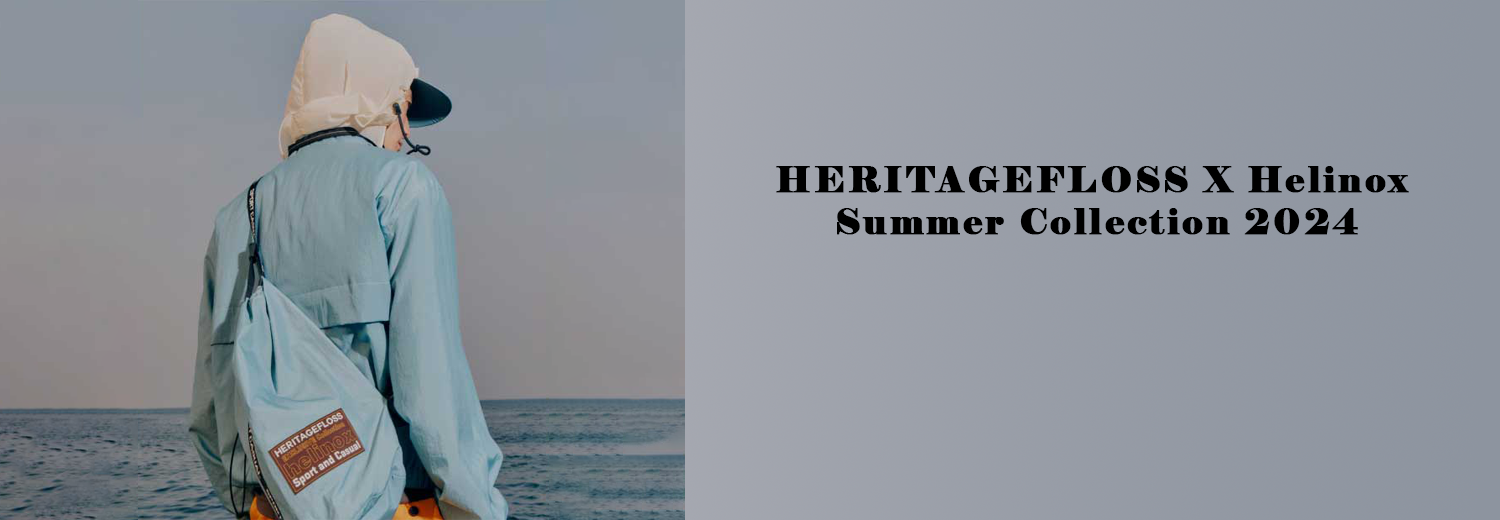
<style>
.page{position:relative;width:1500px;height:520px}
.page>*{position:absolute;margin:0}
.t1{font:35px "Elephant-Regular";letter-spacing:0.075em;color:#000000;font-weight:bold}
</style>
<div class="page">
<p class="t1" style="left:776px;top:166px;width:633px;height:69px;text-align:center">HERITAGEFLOSS X Helinox <br>Summer Collection 2024</p>
</div>
